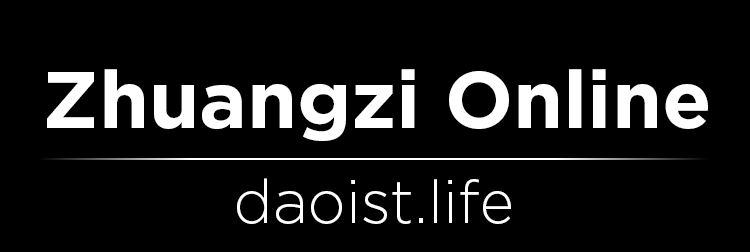
<style>
.page{position:relative;width:750px;height:252px;background:#000000}
.page>*{position:absolute;margin:0}
.t1{font:80.4px "Gotham-Bold";color:#ffffff}
.t2{font:60px "Gotham-Light";color:#ffffff}
</style>
<div class="page">
<p class="t1" style="left:47px;top:69px;width:661px;height:72px">Zhuangzi Online</p>
<p class="t2" style="left:237px;top:178px;width:274px;height:46px">daoist.life</p>
</div>
